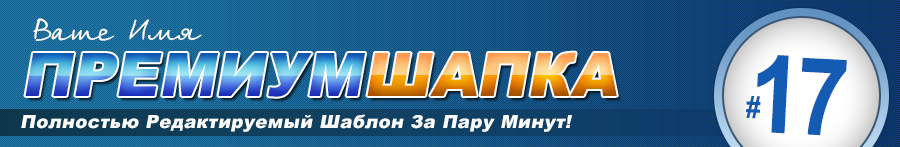
<style>
.page{position:relative;width:900px;height:147px}
.page>*{position:absolute;margin:0}
.t1{font:30px "BirchCTT";color:#ffffff;font-style:italic}
.t2{font:60px "Arial-Black";text-transform:uppercase;font-style:italic}
.t3{font:107.8px "Arial-BoldMT";letter-spacing:-0.05em;color:#145bb4;scale:0.87 1}
.t4{font:30px "Arial-BoldMT";letter-spacing:-0.05em;color:#145bb4;scale:0.87 1}
.t5{font:18px "Arial-Black";letter-spacing:0.025em;color:#fafcfc;font-style:italic}
.t6{font:18px "Arial-Black";letter-spacing:0.025em;color:#fafcfa;font-style:italic}
</style>
<div class="page">
<p class="t1" style="left:33px;top:18px;width:169px;height:23px">Ваше Имя</p>
<p class="t2" style="left:25px;top:53px;width:340px;height:44px">Премиум</p>
<p class="t2" style="left:367px;top:52px;width:250px;height:44px">шапка</p>
<p class="t3" style="left:757px;top:55px;width:90px;height:81px;rotate:3deg">17</p>
<p class="t4" style="left:746px;top:96px;width:15px;height:23px;rotate:3deg">#</p>
<p class="t5" style="left:21px;top:114px;width:551px;height:18px">Полностью Редактируемый Шаблон За Пару Минут<span class="t6">!</span></p>
</div>
